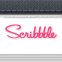
<style>
.page{position:relative;width:62px;height:62px;background:#ffffff}
.page>*{position:absolute;margin:0}
.t1{font:22.5px "RefreshmentStand";letter-spacing:-0.025em;color:#ff407a;font-weight:bold}
</style>
<div class="page">
<p class="t1" style="left:5px;top:24px;width:52px;height:15px">Scribbble</p>
</div>
